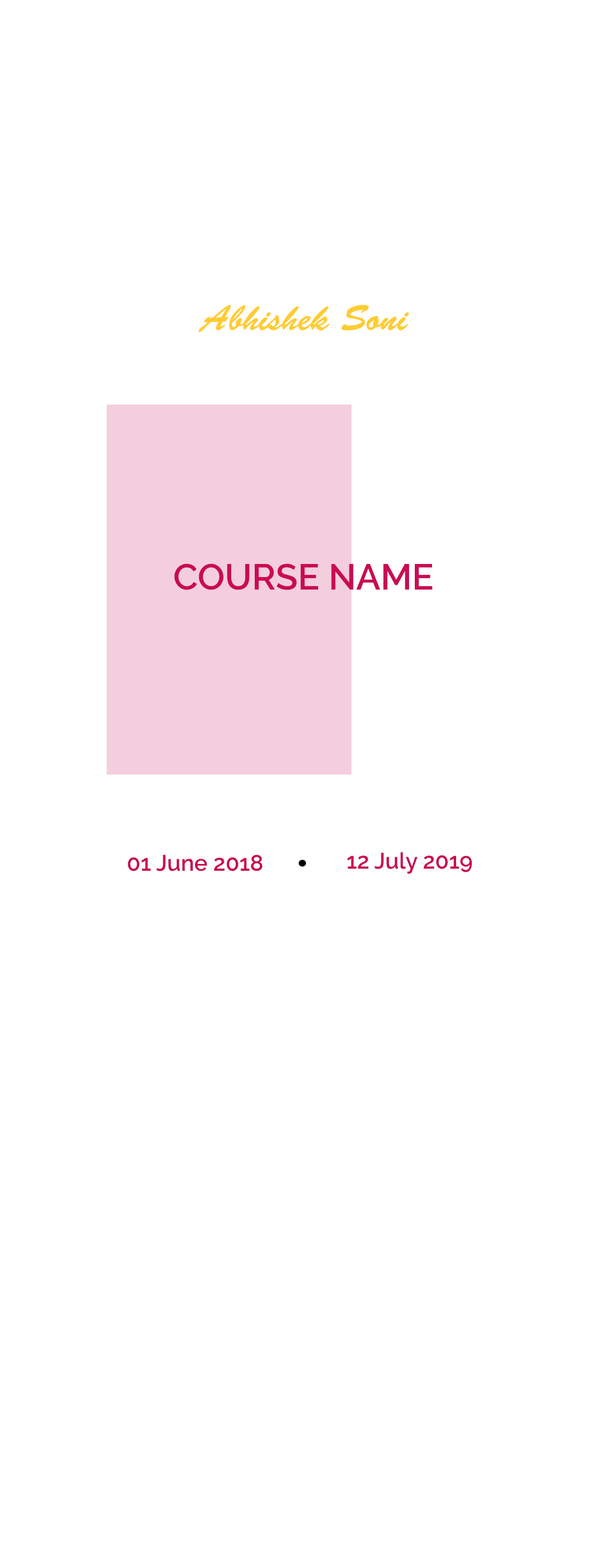
<style>
.page{position:relative;width:612px;height:1568px;background:#ffffff}
.page>*{position:absolute;margin:0}
.t1{font:36.1px "BrushScriptStd";color:#ffcc31}
.t2{font:36.1px "Raleway-SemiBold";color:#c90b53;text-transform:uppercase}
.t3{font:22.5px "Raleway-SemiBold";color:#c90b53}
</style>
<div class="page">
<p class="t1" style="left:198px;top:305px;width:211px;height:27px">Abhishek Soni</p>
<p class="t2" style="left:174px;top:563px;width:258px;height:27px">Course Name</p>
<p class="t3" style="left:128px;top:855px;width:134px;height:16px">01 June 2018</p>
<p class="t3" style="left:347px;top:852px;width:125px;height:22px">12 July 2019</p>
</div>
